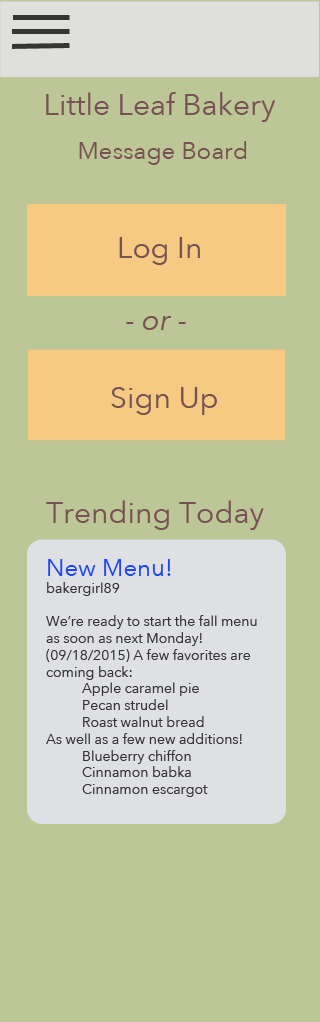
<style>
.page{position:relative;width:320px;height:1022px;background:#bdc696}
.page>*{position:absolute;margin:0}
.t1{font:30px "AvenirNext-Regular";color:#775253}
.t2{font:24px "AvenirNext-Regular";color:#775253}
.t3{font:30px "AvenirNext-Italic";color:#775253}
.t4{font:14px "AvenirNext-Regular";color:#353535}
.t5{font:24px "AvenirNext-Regular";color:#1e46f3}
</style>
<div class="page">
<p class="t1" style="left:46px;top:92px;width:230px;height:30px">Little Leaf Bakery</p>
<p class="t2" style="left:79px;top:141px;width:168px;height:24px">Message Board</p>
<p class="t1" style="left:119px;top:237px;width:81px;height:28px">Log In</p>
<p class="t3" style="left:126px;top:316px;width:60px;height:14px"><span class="t1">- </span>or <span class="t1">-</span></p>
<p class="t1" style="left:111px;top:387px;width:106px;height:28px">Sign Up</p>
<p class="t1" style="left:46px;top:500px;width:218px;height:30px">Trending Today</p>
<p class="t4" style="left:46px;top:559px;width:211px;height:238px"><span class="t5">New Menu!<br></span>bakergirl89<br><br>We’re ready to start the fall menu as soon as next Monday! (09/18/2015) A few favorites are coming back: <br> Apple caramel pie <br> Pecan strudel <br> Roast walnut bread <br>As well as a few new additions! <br> Blueberry chiffon <br> Cinnamon babka <br> Cinnamon escargot</p>
</div>
